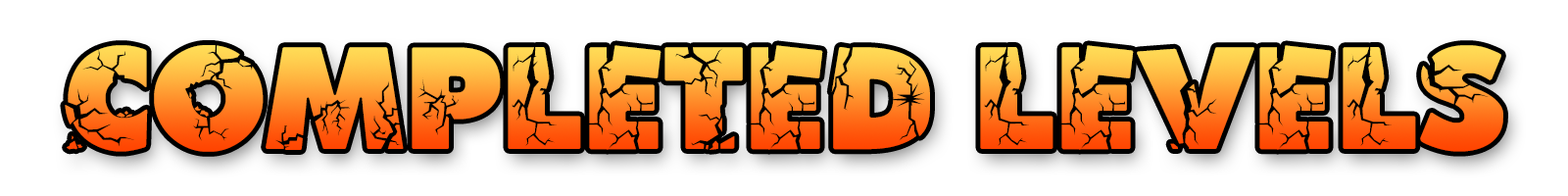
<style>
.page{position:relative;width:1568px;height:196px;background:#ffffff}
.page>*{position:absolute;margin:0}
.t1{font:156.8px "Ben-Krush"}
</style>
<div class="page">
<p class="t1" style="left:65px;top:45px;width:1438px;height:107px">COMPLETED LEVELS</p>
</div>
